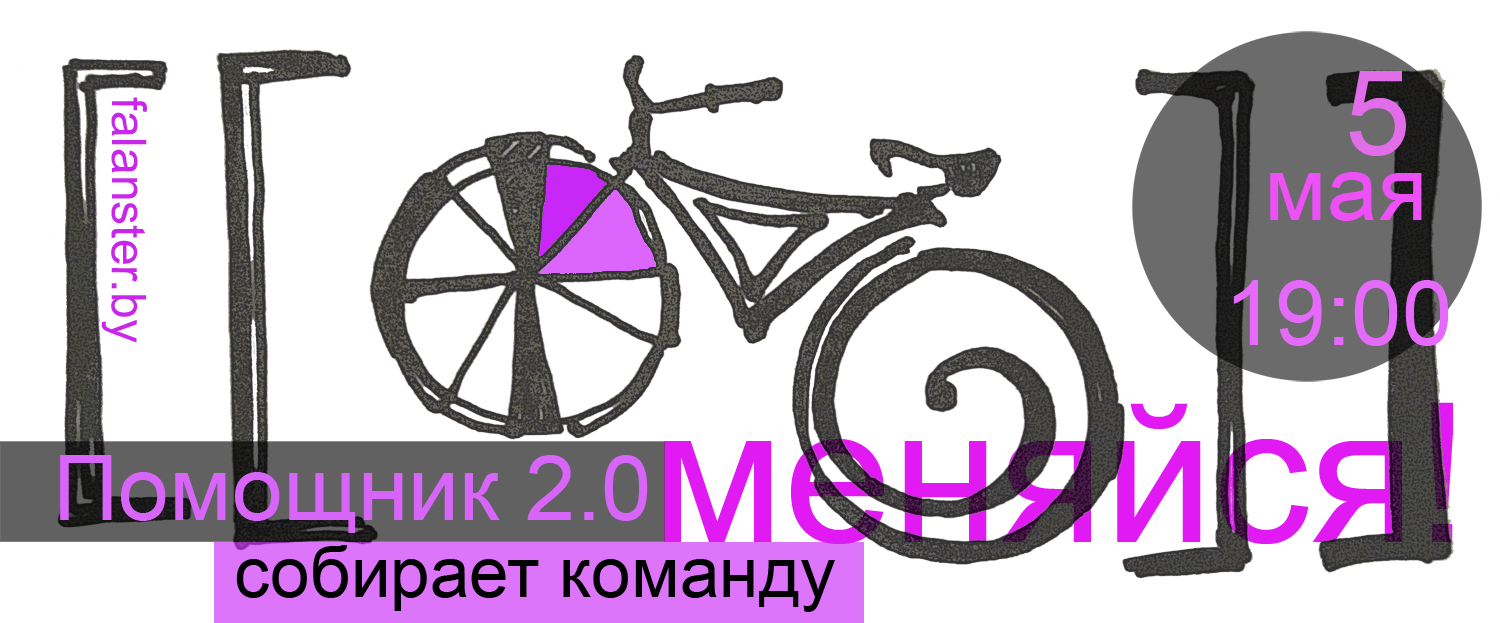
<style>
.page{position:relative;width:1500px;height:623px;background:#ffffff}
.page>*{position:absolute;margin:0}
.t1{font:117.9px "ArialMT";color:#e16de8}
.t2{font:48.1px "ArialMT";color:#c826eb}
.t3{font:91.3px "ArialMT";color:#ed50f7}
.t4{font:91.3px "ArialMT";color:#e569fb}
.t5{font:193.9px "ArialMT";color:#e11af3}
.t6{font:91.3px "ArialMT";color:#d865f9}
.t7{font:71.1px "ArialMT";color:#000000}
</style>
<div class="page">
<p class="t1" style="left:1349px;top:71px;width:57px;height:85px">5</p>
<p class="t2" style="left:101px;top:97px;width:46px;height:246px;rotate:90deg">falanster.by</p>
<p class="t3" style="left:1270px;top:172px;width:152px;height:49px">мая</p>
<p class="t4" style="left:1233px;top:280px;width:216px;height:66px">19:00</p>
<p class="t5" style="left:664px;top:402px;width:789px;height:142px">меняйся!</p>
<p class="t6" style="left:60px;top:455px;width:588px;height:78px">Помощник 2.0</p>
<p class="t7" style="left:236px;top:545px;width:599px;height:67px">собирает команду</p>
</div>
